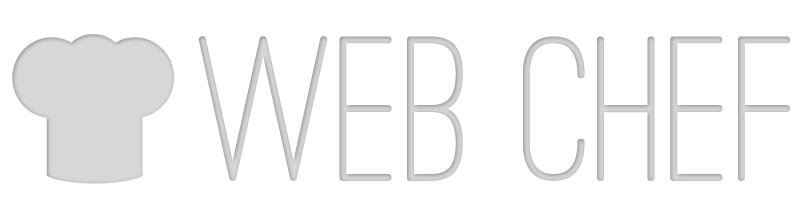
<style>
.page{position:relative;width:800px;height:200px;background:#ffffff}
.page>*{position:absolute;margin:0}
.t1{font:214px "OstrichSansRounded-Medium";color:#cacaca}
</style>
<div class="page">
<p class="t1" style="left:198px;top:36px;width:592px;height:145px">Web Chef</p>
</div>
